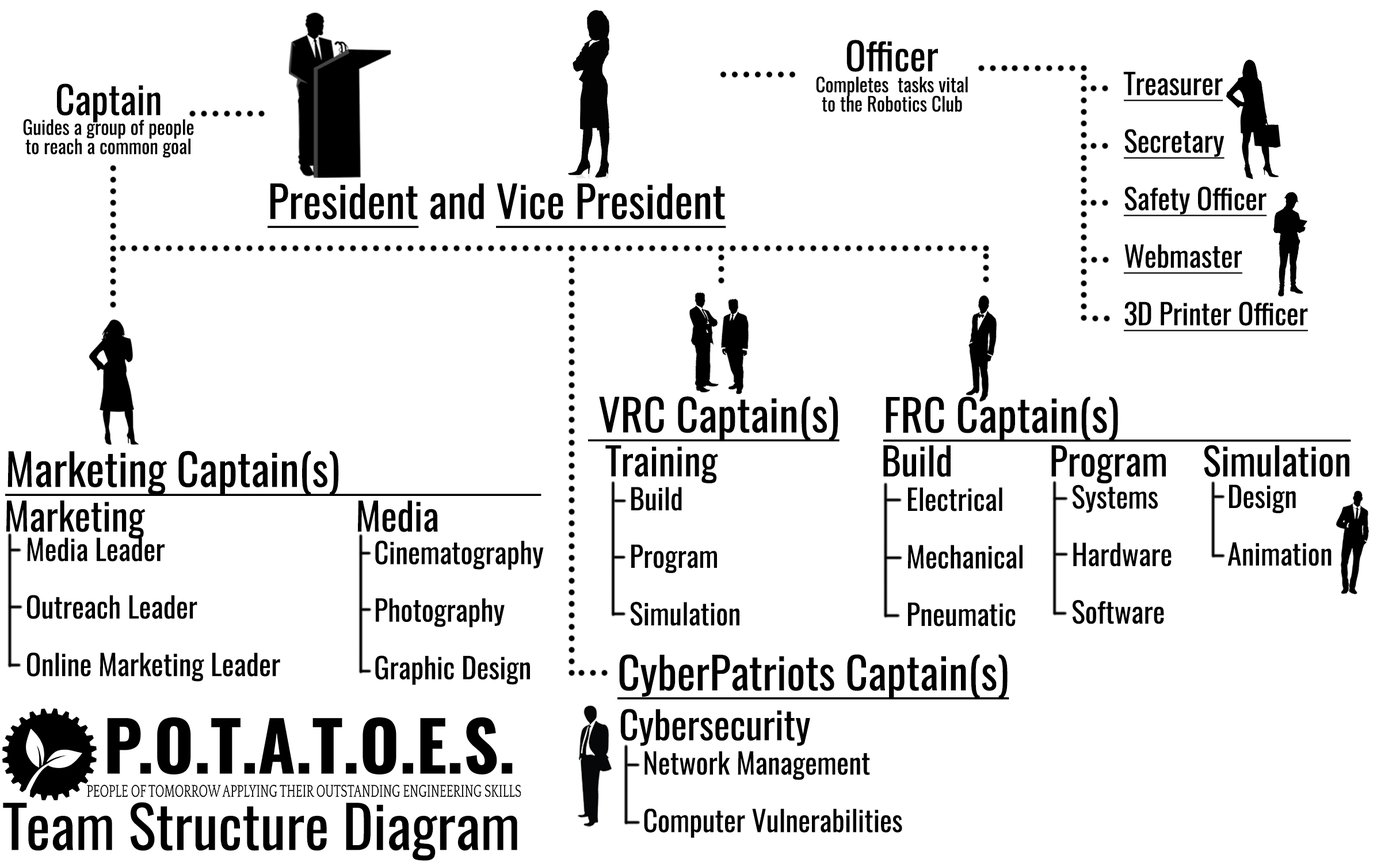
<style>
.page{position:relative;width:1381px;height:863px;background:#ffffff}
.page>*{position:absolute;margin:0}
.t1{font:38.4px "Oswald-Regular";color:#000000}
.t2{font:19.2px/19.2px "Oswald-Regular";color:#000000}
.t3{font:28.8px/57.6px "Oswald-Regular";color:#000000;text-decoration:underline}
.t4{font:44px "Oswald-Regular";color:#000000;text-decoration:underline}
.t5{font:44px "Oswald-Regular";color:#000000}
.t6{font:28.8px/57.6px "Oswald-Regular";color:#000000}
.t7{font:58.4px "Oswald-Regular";color:#000000}
</style>
<div class="page">
<p class="t1" style="left:847px;top:40px;width:91px;height:32px">Officer</p>
<p class="t2" style="left:816px;top:77px;width:152px;height:35px;text-align:center">Completes  tasks vital<br>to the Robotics Club</p>
<p class="t3" style="left:1123px;top:71px;width:185px;height:261px">Treasurer<br>Secretary<br>Safety Officer<br>Webmaster<br>3D Printer Officer</p>
<p class="t1" style="left:57px;top:83px;width:104px;height:40px">Captain</p>
<p class="t2" style="left:23px;top:119px;width:171px;height:39px;text-align:center">Guides a group of people<br>to reach a common goal</p>
<p class="t4" style="left:268px;top:183px;width:458px;height:45px">President<span class="t5"> and </span>Vice President</p>
<p class="t4" style="left:588px;top:397px;width:252px;height:45px">VRC Captain(s)</p>
<p class="t4" style="left:883px;top:397px;width:468px;height:45px">FRC Captain(s)</p>
<p class="t1" style="left:605px;top:445px;width:113px;height:38px">Training</p>
<p class="t1" style="left:883px;top:445px;width:467px;height:39px">Build           Program    Simulation</p>
<p class="t4" style="left:5px;top:451px;width:537px;height:45px">Marketing Captain(s)</p>
<p class="t6" style="left:1073px;top:485px;width:99px;height:139px">Systems<br>Hardware<br>Software</p>
<p class="t6" style="left:1228px;top:485px;width:104px;height:81px">Design<br>Animation</p>
<p class="t6" style="left:630px;top:487px;width:110px;height:139px">Build<br>Program<br>Simulation</p>
<p class="t6" style="left:908px;top:487px;width:115px;height:140px">Electrical<br>Mechanical<br>Pneumatic</p>
<p class="t1" style="left:6px;top:500px;width:432px;height:39px">Marketing                        Media</p>
<p class="t6" style="left:27px;top:538px;width:253px;height:144px">Media Leader <br>Outreach Leader<br>Online Marketing Leader</p>
<p class="t6" style="left:375px;top:540px;width:169px;height:145px">Cinematography<br>Photography<br>Graphic Design</p>
<p class="t4" style="left:618px;top:654px;width:391px;height:46px">CyberPatriots Captain(s)</p>
<p class="t1" style="left:620px;top:709px;width:190px;height:37px">Cybersecurity</p>
<p class="t6" style="left:644px;top:751px;width:258px;height:87px">Network Management<br>Computer Vulnerabilities</p>
<p class="t7" style="left:3px;top:802px;width:514px;height:59px">Team Structure Diagram</p>
</div>
